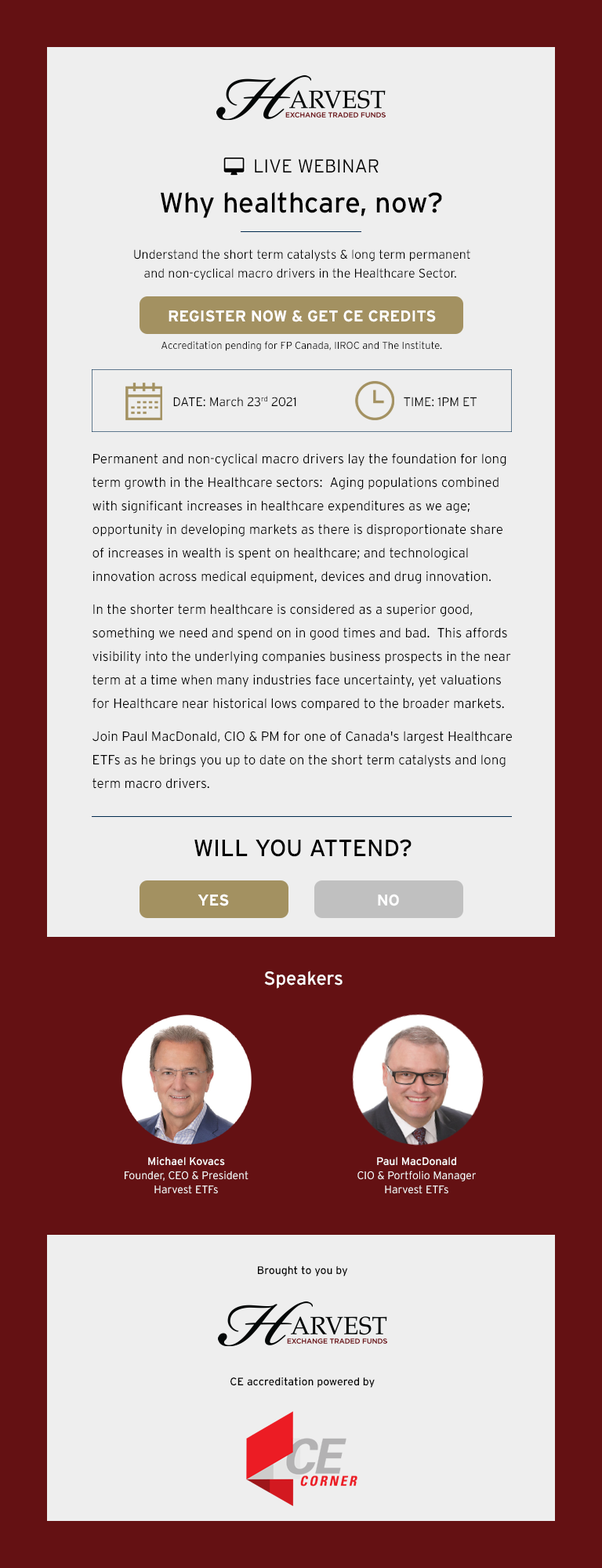
<style>
.page{position:relative;width:602px;height:1568px;background:#eeeeee}
.page>*{position:absolute;margin:0}
.t1{font:18.8px "Interstate-Light";color:#000000}
.t2{font:28.2px "Interstate-Regular";color:#000000}
.t3{font:12.5px/18.8px "Interstate-Light";color:#000000}
.t4{font:15.7px "Interstate-Bold";color:#ffffff}
.t5{font:10.2px "Interstate-Light";color:#000000}
.t6{font:12.5px "Interstate-Light";color:#000000}
.t7{font:13.3px/23.5px "Interstate-Light";color:#000000}
.t8{font:13.3px/32.9px "Interstate-Light";color:#000000}
.t9{font:23.5px "Interstate-Regular";color:#000000}
.t10{font:18.8px "Interstate-Regular";color:#ffffff}
.t11{font:11px/14.1px "Interstate-Light";color:#ffffff}
.t12{font:11px/14.1px "Interstate-Regular";color:#ffffff}
.t13{font:11px "Interstate-Regular";color:#000000}
</style>
<div class="page">
<p class="t1" style="left:255px;top:159px;width:124px;height:13px">LIVE WEBINAR</p>
<p class="t2" style="left:161px;top:191px;width:281px;height:27px">Why healthcare, now?</p>
<p class="t3" style="left:134px;top:249px;width:336px;height:31px;text-align:center">Understand the short term catalysts &amp; long term permanent<br>and non-cyclical macro drivers in the Healthcare Sector.</p>
<p class="t4" style="left:169px;top:310px;width:267px;height:12px">REGISTER NOW &amp; GET CE CREDITS</p>
<p class="t5" style="left:162px;top:341px;width:280px;height:10px">Accreditation pending for FP Canada, IIROC and The Institute.</p>
<p class="t6" style="left:173px;top:396px;width:123px;height:11px">DATE: March 23rd 2021</p>
<p class="t6" style="left:404px;top:397px;width:73px;height:10px">TIME: 1PM ET</p>
<p class="t7" style="left:93px;top:453px;width:419px;height:336px">Permanent and non-cyclical macro drivers lay the foundation for long<br>term growth in the Healthcare sectors:  Aging populations combined<br>with significant increases in healthcare expenditures as we age;<br>opportunity in developing markets as there is disproportionate share<br>of increases in wealth is spent on healthcare; and technological<br>innovation across medical equipment, devices and drug innovation.  <br><span class="t8">In the shorter term healthcare is considered as a superior good,<br></span>something we need and spend on in good times and bad.  This affords<br>visibility into the underlying companies business prospects in the near<br>term at a time when many industries face uncertainty, yet valuations<br>for Healthcare near historical lows compared to the broader markets.<br><span class="t8">Join Paul MacDonald, CIO &amp; PM for one of Canada's largest Healthcare<br></span>ETFs as he brings you up to date on the short term catalysts and long<br>term macro drivers.</p>
<p class="t9" style="left:194px;top:839px;width:218px;height:18px">WILL YOU ATTEND?</p>
<p class="t4" style="left:198px;top:894px;width:31px;height:12px">YES</p>
<p class="t4" style="left:378px;top:894px;width:21px;height:12px">NO</p>
<p class="t10" style="left:264px;top:971px;width:79px;height:18px">Speakers</p>
<p class="t11" style="left:125px;top:1156px;width:124px;height:38px;text-align:center"><span class="t12">Michael Kovacs<br></span>Founder, CEO &amp; President<br>Harvest ETFs</p>
<p class="t11" style="left:358px;top:1156px;width:118px;height:38px;text-align:center"><span class="t12">Paul MacDonald<br></span>CIO &amp; Portfolio Manager<br>Harvest ETFs</p>
<p class="t13" style="left:258px;top:1265px;width:90px;height:11px">Brought to you by</p>
<p class="t13" style="left:230px;top:1377px;width:145px;height:11px">CE accreditation powered by</p>
</div>
